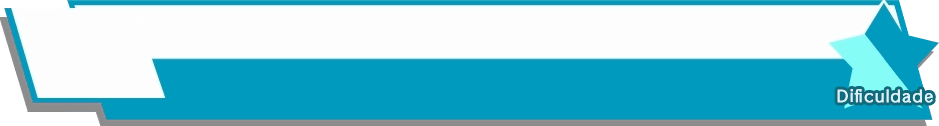
<style>
.page{position:relative;width:939px;height:126px;background:#fefdfe}
.page>*{position:absolute;margin:0}
.t1{font:16px "RodinPro-M";letter-spacing:0.067em;color:#d9f1f8;font-weight:bold}
</style>
<div class="page">
<p class="t1" style="left:837px;top:89px;width:96px;height:14px">Dificuldade</p>
</div>
